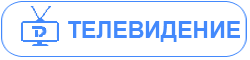
<style>
.page{position:relative;width:250px;height:60px;background:#ffffff}
.page>*{position:absolute;margin:0}
.t1{font:23px "Arial-BoldMT";color:#4389fc}
</style>
<div class="page">
<p class="t1" style="left:68px;top:21px;width:172px;height:21px">ТЕЛЕВИДЕНИЕ</p>
</div>
